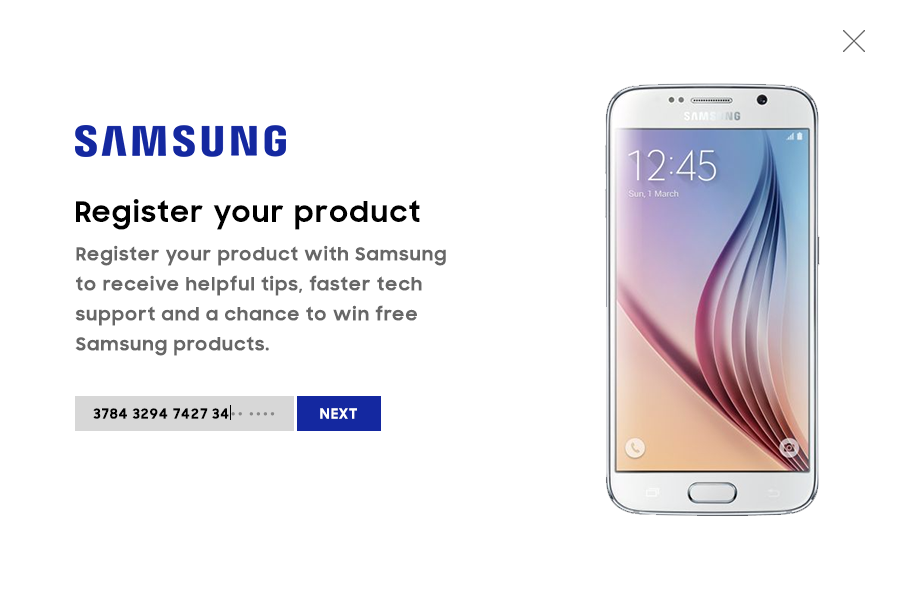
<style>
.page{position:relative;width:900px;height:600px;background:#ffffff}
.page>*{position:absolute;margin:0}
.t1{font:28px "SamsungSharpSans-Bold";letter-spacing:0.075em;color:#000000}
.t2{font:18px/30px "SamsungSharpSans-Bold";letter-spacing:0.075em;color:#676767}
.t3{font:14px "SamsungSharpSans-Bold";letter-spacing:0.075em;color:#000000}
.t4{font:14px "SamsungSharpSans-Bold";letter-spacing:0.075em;color:#888888}
.t5{font:14px "SamsungSharpSans-Bold";letter-spacing:0.075em;color:#ffffff}
</style>
<div class="page">
<p class="t1" style="left:76px;top:199px;width:344px;height:31px">Register your product</p>
<p class="t2" style="left:75px;top:245px;width:371px;height:111px">Register your product with Samsung<br>to receive helpful tips, faster tech<br>support and a chance to win free<br>Samsung products.</p>
<p class="t3" style="left:93px;top:408px;width:136px;height:11px">3784 3294 7427 34</p>
<p class="t4" style="left:231px;top:412px;width:44px;height:4px">•• ••••</p>
<p class="t5" style="left:320px;top:408px;width:37px;height:11px">NEXT</p>
</div>
